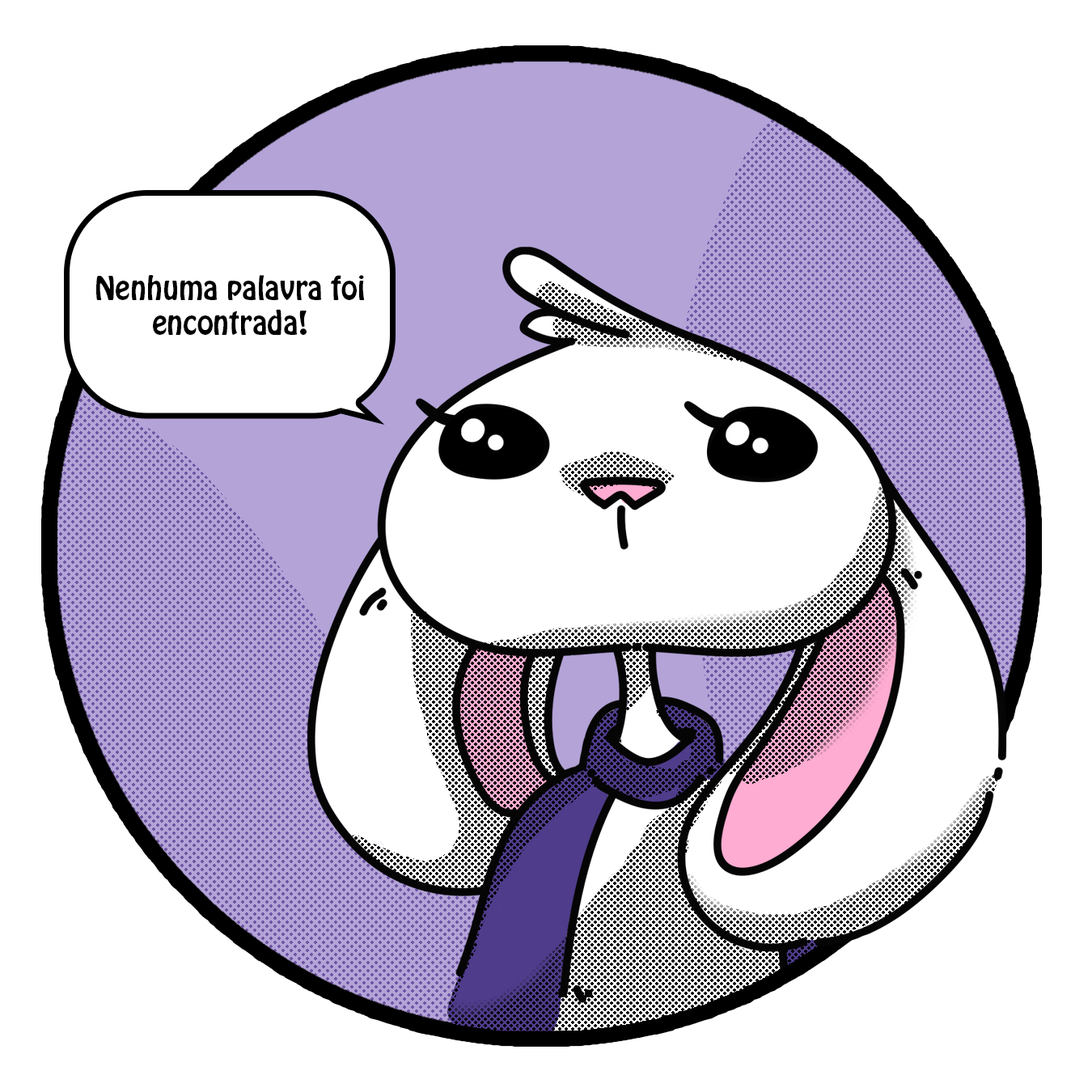
<style>
.page{position:relative;width:1092px;height:1092px;background:#ffffff}
.page>*{position:absolute;margin:0}
.t1{font:29.1px "HoboStd";color:#000000}
.t2{font:12.9px "HoboStd";color:#000000}
</style>
<div class="page">
<p class="t1" style="left:96px;top:275px;width:269px;height:60px"><span class="t2"><br><br></span><br>Nenhuma palavra foi encontrada!</p>
</div>
